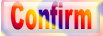
<style>
.page{position:relative;width:103px;height:36px}
.page>*{position:absolute;margin:0}
.t1{font:37.3px "Arial-Black";scale:0.51 1}
</style>
<div class="page">
<p class="t1" style="left:11px;top:1px;width:81px;height:29px">Confirm</p>
</div>
